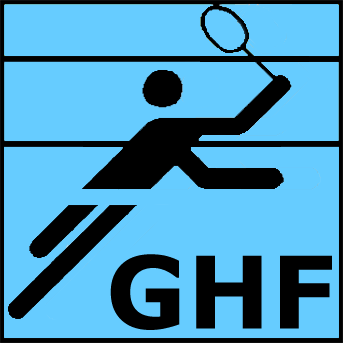
<style>
.page{position:relative;width:343px;height:343px;background:#66ccff}
.page>*{position:absolute;margin:0}
.t1{font:100px "Verdana-Bold";color:#000000}
</style>
<div class="page">
<p class="t1" style="left:110px;top:254px;width:222px;height:76px">GHF</p>
</div>
